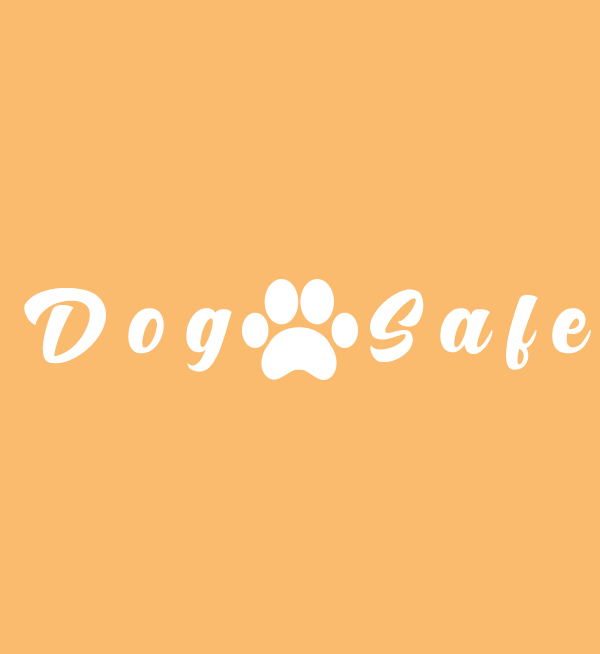
<style>
.page{position:relative;width:600px;height:654px;background:#fabb6e}
.page>*{position:absolute;margin:0}
.t1{font:132px "Hunters";letter-spacing:0.15em;color:#ffffff}
</style>
<div class="page">
<p class="t1" style="left:24px;top:288px;width:208px;height:84px">Dog</p>
<p class="t1" style="left:370px;top:289px;width:221px;height:81px">Safe</p>
</div>
